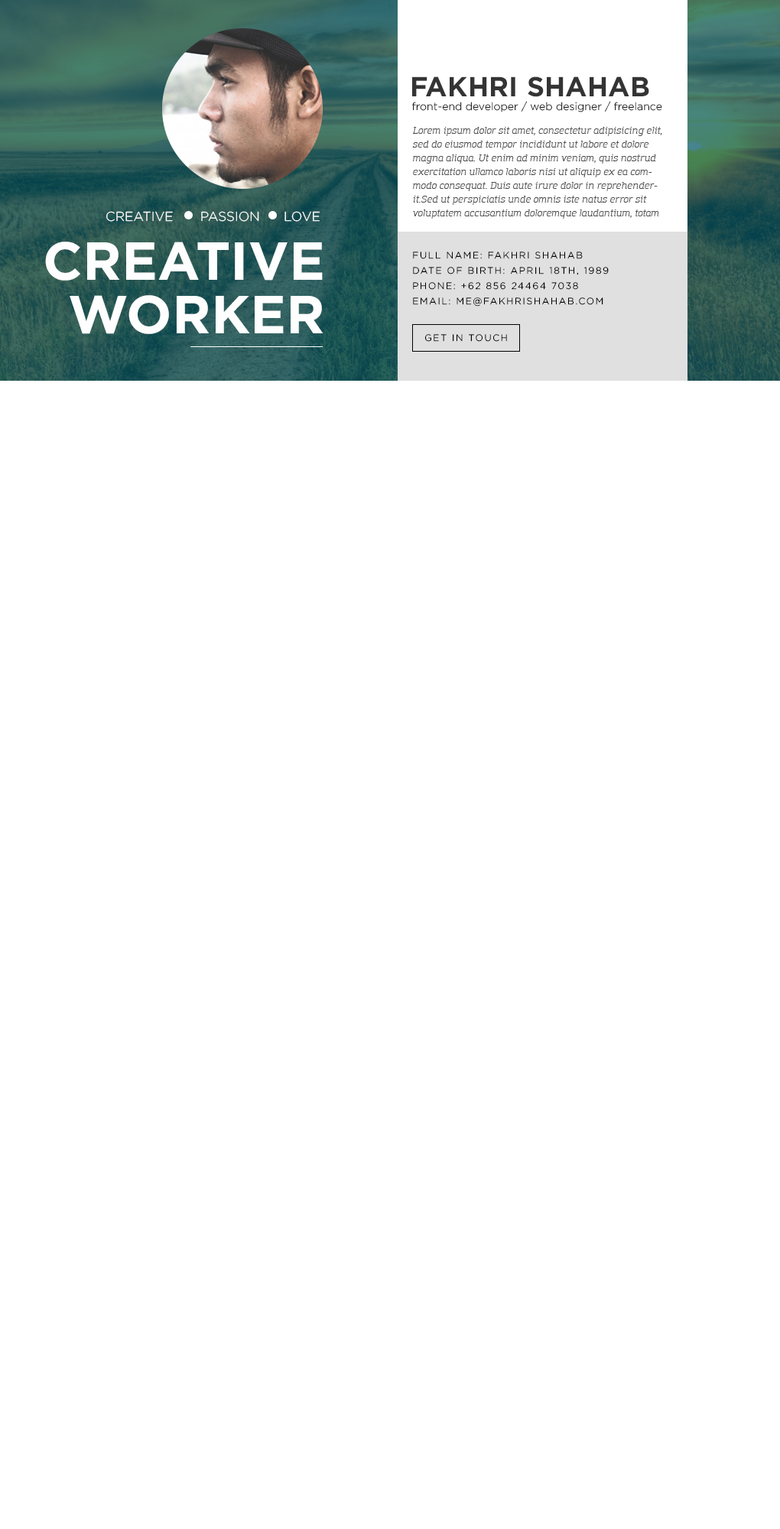
<style>
.page{position:relative;width:780px;height:1529px;background:#ffffff}
.page>*{position:absolute;margin:0}
.t1{font:27.5px "Gotham-Bold";letter-spacing:0.005em;color:#343434}
.t2{font:10.7px "Gotham-Light";letter-spacing:0.005em;color:#000000}
.t3{font:9.2px/13.8px "AmazingGrotesk-Italic";letter-spacing:0.005em;color:#4f4e4e}
.t4{font:13px "Gotham-Light";letter-spacing:0.005em;color:#fefefe}
.t5{font:53.5px/53.7px "Gotham-Bold";letter-spacing:0.005em;color:#fefefe}
.t6{font:9.2px/15.3px "Gotham-Light";letter-spacing:0.145em;color:#000000}
.t7{font:9.2px "Gotham-Light";letter-spacing:0.145em;color:#000000}
</style>
<div class="page">
<p class="t1" style="left:412px;top:76px;width:237px;height:21px">FAKHRI SHAHAB</p>
<p class="t2" style="left:412px;top:101px;width:250px;height:11px">front-end developer / web designer / freelance</p>
<p class="t3" style="left:412px;top:127px;width:250px;height:92px;text-align:right">Lorem ipsum dolor sit amet, consectetur adipisicing elit, sed do eiusmod tempor incididunt ut labore et dolore magna aliqua. Ut enim ad minim veniam, quis nostrud exercitation ullamco laboris nisi ut aliquip ex ea commodo consequat. Duis aute irure dolor in reprehenderit.Sed ut perspiciatis unde omnis iste natus error sit voluptatem accusantium doloremque laudantium, totam</p>
<p class="t4" style="left:106px;top:211px;width:214px;height:11px">CREATIVE    PASSION      LOVE</p>
<p class="t5" style="left:45px;top:242px;width:278px;height:92px">CREATIVE<br>WORKER</p>
<p class="t6" style="left:413px;top:252px;width:196px;height:55px;text-align:right">FULL NAME: FAKHRI SHAHAB<br>DATE OF BIRTH: APRIL 18TH, 1989<br>PHONE: +62 856 24464 7038<br>EMAIL: ME@FAKHRISHAHAB.COM</p>
<p class="t7" style="left:425px;top:334px;width:82px;height:8px">GET IN TOUCH</p>
</div>
